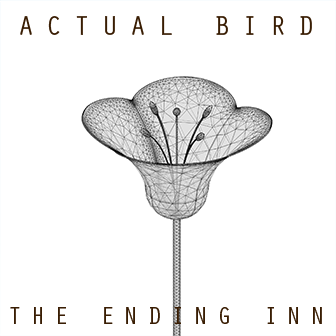
<style>
.page{position:relative;width:336px;height:336px;background:#ffffff}
.page>*{position:absolute;margin:0}
.t1{font:28px "OratorStd";letter-spacing:0.4em;color:#391d03}
.t2{font:24.5px "OratorStd";letter-spacing:0.35em;color:#391d03}
</style>
<div class="page">
<p class="t1" style="left:20px;top:16px;width:292px;height:19px">ACTUAL BIRD</p>
<p class="t2" style="left:10px;top:307px;width:312px;height:17px">THE ENDING INN</p>
</div>
